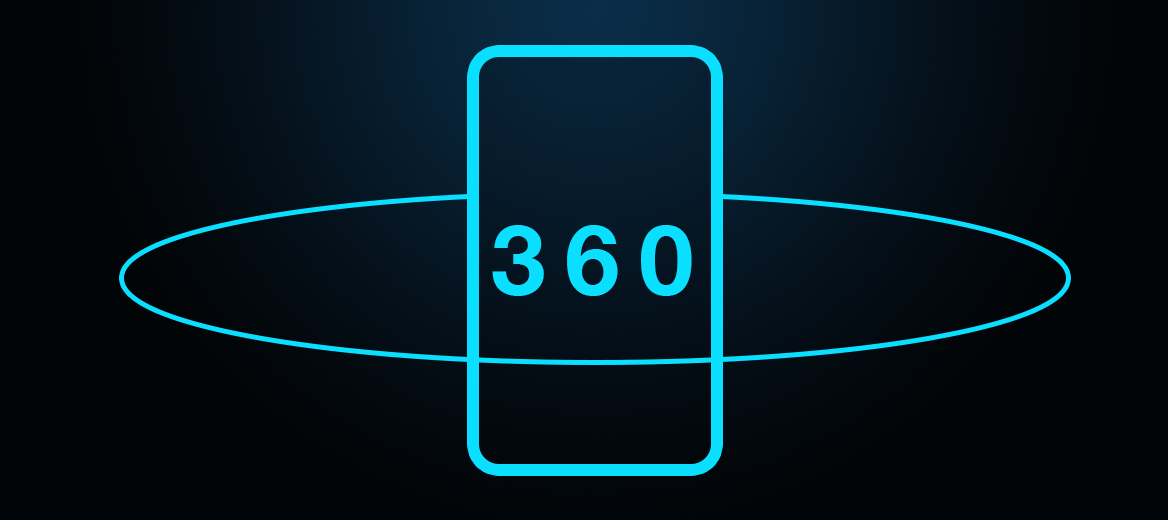
<style>
.page{position:relative;width:1168px;height:520px;background:#020508}
.page>*{position:absolute;margin:0}
.t1{font:98.3px "HelveticaNeue-Bold";letter-spacing:0.2em;color:#0adfff}
</style>
<div class="page">
<p class="t1" style="left:492px;top:225px;width:200px;height:71px">360</p>
</div>
